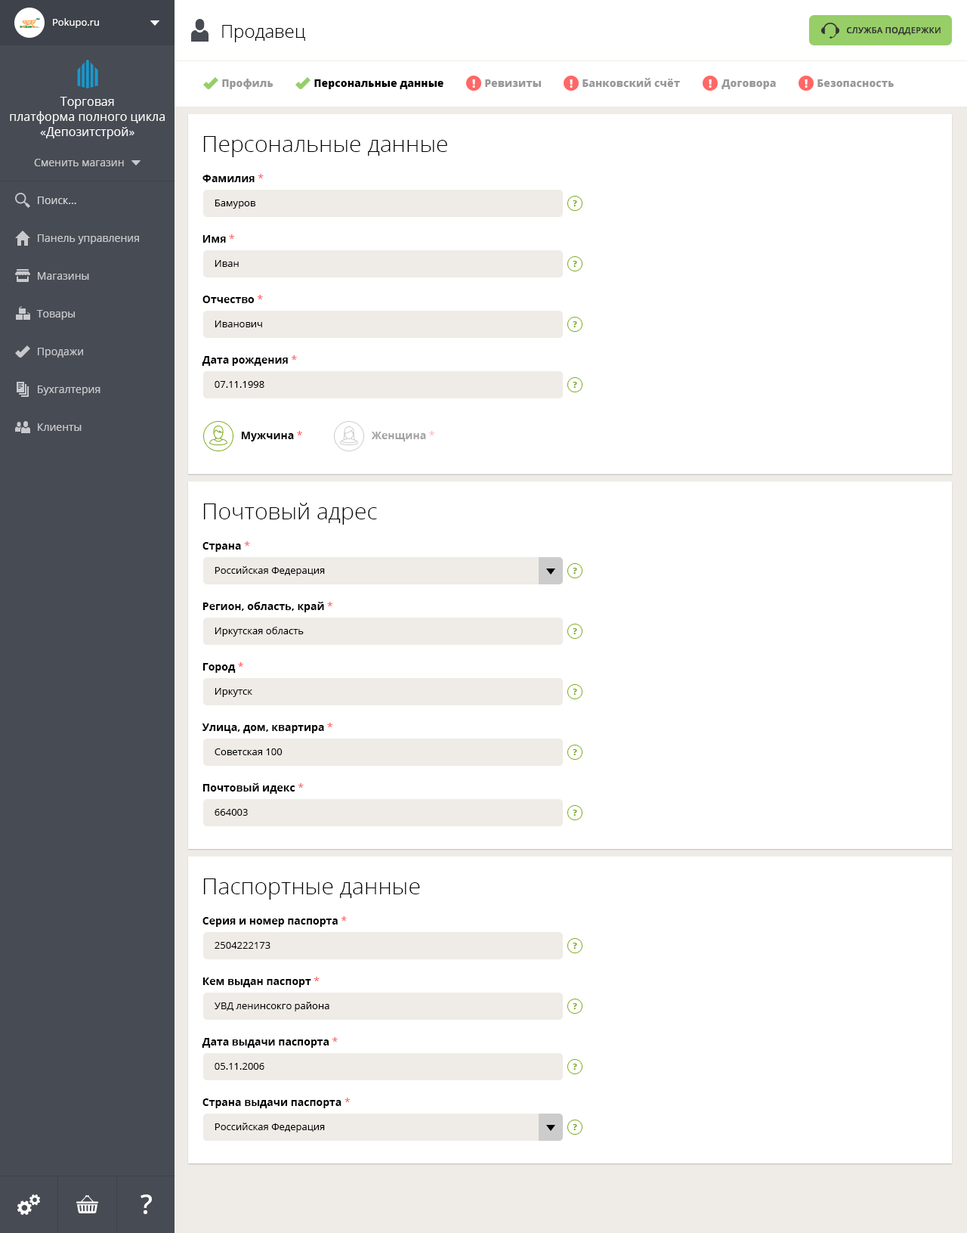
<style>
.page{position:relative;width:967px;height:1233px;background:#ffffff}
.page>*{position:absolute;margin:0}
.t1{font:9.8px "OpenSans";color:#ffffff}
.t2{font:18.1px "OpenSans-Light";color:#010101}
.t3{font:8.3px "OpenSans-Semibold";letter-spacing:0.025em;color:#333333;text-transform:uppercase}
.t4{font:10.6px "OpenSans-Extrabold";color:#999999}
.t5{font:10.6px "OpenSans-Extrabold";color:#000000}
.t6{font:12.1px/15.1px "OpenSans";color:#ffffff}
.t7{font:22.7px "OpenSans-Light";color:#000000}
.t8{font:10.6px "OpenSans";color:#c8c9cc}
.t9{font:10.6px "OpenSans-Bold";color:#000000}
.t10{font:10.6px "OpenSans";color:#fd5656}
.t11{font:10.6px "OpenSans";color:#d3d4d5}
.t12{font:9.8px "OpenSans";color:#000000}
.t13{font:8.3px "OpenSans-Extrabold";color:#7caa1f}
.t14{font:10.6px "OpenSans-Bold";color:#a3a3a3}
.t15{font:10.6px "OpenSans";color:#a3a3a3}
</style>
<div class="page">
<p class="t1" style="left:53px;top:18px;width:46px;height:10px">Pokupo.ru</p>
<p class="t2" style="left:222px;top:25px;width:83px;height:17px">Продавец</p>
<p class="t3" style="left:847px;top:26px;width:94px;height:10px">Служба поддержки</p>
<p class="t4" style="left:583px;top:78px;width:97px;height:9px">Банковский счёт</p>
<p class="t4" style="left:222px;top:79px;width:52px;height:10px">Профиль</p>
<p class="t5" style="left:314px;top:79px;width:130px;height:10px">Персональные данные</p>
<p class="t4" style="left:485px;top:79px;width:56px;height:8px">Ревизиты</p>
<p class="t4" style="left:722px;top:79px;width:54px;height:10px">Договора</p>
<p class="t4" style="left:818px;top:79px;width:76px;height:8px">Безопасность</p>
<p class="t6" style="left:10px;top:97px;width:155px;height:42px;text-align:center">Торговая<br>платформа полного цикла<br>«Депозитстрой»</p>
<p class="t7" style="left:203px;top:136px;width:244px;height:21px">Персональные данные</p>
<p class="t8" style="left:34px;top:159px;width:90px;height:7px">Сменить магазин</p>
<p class="t9" style="left:203px;top:174px;width:61px;height:8px">Фамилия <span class="t10">*</span></p>
<p class="t11" style="left:38px;top:196px;width:38px;height:8px">Поиск...</p>
<p class="t12" style="left:215px;top:200px;width:41px;height:9px">Бамуров</p>
<p class="t13" style="left:573px;top:200px;width:4px;height:6px">?</p>
<p class="t8" style="left:38px;top:234px;width:101px;height:10px">Панель управления</p>
<p class="t9" style="left:203px;top:234px;width:32px;height:9px">Имя <span class="t10">*</span></p>
<p class="t12" style="left:215px;top:260px;width:24px;height:7px">Иван</p>
<p class="t13" style="left:573px;top:261px;width:4px;height:6px">?</p>
<p class="t8" style="left:38px;top:272px;width:51px;height:8px">Магазины</p>
<p class="t9" style="left:203px;top:295px;width:60px;height:8px">Отчество <span class="t10">*</span></p>
<p class="t8" style="left:36px;top:310px;width:39px;height:10px">Товары</p>
<p class="t12" style="left:215px;top:320px;width:47px;height:7px">Иванович</p>
<p class="t13" style="left:573px;top:321px;width:4px;height:6px">?</p>
<p class="t8" style="left:38px;top:348px;width:45px;height:9px">Продажи</p>
<p class="t9" style="left:202px;top:355px;width:95px;height:11px">Дата рождения <span class="t10">*</span></p>
<p class="t8" style="left:38px;top:385px;width:63px;height:10px">Бухгалтерия</p>
<p class="t12" style="left:215px;top:381px;width:50px;height:7px">07.11.1998</p>
<p class="t13" style="left:573px;top:382px;width:4px;height:6px">?</p>
<p class="t8" style="left:38px;top:423px;width:44px;height:8px">Клиенты</p>
<p class="t9" style="left:241px;top:431px;width:61px;height:10px">Мужчина <span class="t10">*</span></p>
<p class="t14" style="left:371px;top:431px;width:64px;height:10px">Женщина <span class="t15">*</span></p>
<p class="t7" style="left:203px;top:503px;width:174px;height:21px">Почтовый адрес</p>
<p class="t9" style="left:203px;top:541px;width:47px;height:11px">Страна <span class="t10">*</span></p>
<p class="t12" style="left:215px;top:566px;width:110px;height:10px">Российская Федерация</p>
<p class="t13" style="left:573px;top:568px;width:4px;height:6px">?</p>
<p class="t9" style="left:203px;top:602px;width:130px;height:10px">Регион, область, край <span class="t10">*</span></p>
<p class="t12" style="left:215px;top:627px;width:89px;height:9px">Иркутская область</p>
<p class="t13" style="left:573px;top:628px;width:4px;height:6px">?</p>
<p class="t9" style="left:203px;top:662px;width:40px;height:11px">Город <span class="t10">*</span></p>
<p class="t12" style="left:215px;top:688px;width:37px;height:9px">Иркутск</p>
<p class="t13" style="left:573px;top:688px;width:4px;height:7px">?</p>
<p class="t9" style="left:202px;top:723px;width:131px;height:10px">Улица, дом, квартира <span class="t10">*</span></p>
<p class="t12" style="left:215px;top:748px;width:68px;height:7px">Советская 100</p>
<p class="t13" style="left:573px;top:749px;width:4px;height:6px">?</p>
<p class="t9" style="left:203px;top:783px;width:101px;height:11px">Почтовый идекс <span class="t10">*</span></p>
<p class="t12" style="left:215px;top:809px;width:33px;height:6px">664003</p>
<p class="t13" style="left:573px;top:809px;width:4px;height:6px">?</p>
<p class="t7" style="left:203px;top:878px;width:217px;height:21px">Паспортные данные</p>
<p class="t9" style="left:203px;top:916px;width:144px;height:11px">Серия и номер паспорта <span class="t10">*</span></p>
<p class="t12" style="left:215px;top:942px;width:56px;height:6px">2504222173</p>
<p class="t13" style="left:573px;top:942px;width:4px;height:6px">?</p>
<p class="t9" style="left:203px;top:976px;width:117px;height:11px">Кем выдан паспорт <span class="t10">*</span></p>
<p class="t12" style="left:214px;top:1001px;width:116px;height:10px">УВД ленинсокго района</p>
<p class="t13" style="left:573px;top:1003px;width:4px;height:6px">?</p>
<p class="t9" style="left:202px;top:1037px;width:136px;height:10px">Дата выдачи паспорта <span class="t10">*</span></p>
<p class="t12" style="left:215px;top:1063px;width:50px;height:6px">05.11.2006</p>
<p class="t13" style="left:573px;top:1063px;width:4px;height:6px">?</p>
<p class="t9" style="left:203px;top:1097px;width:148px;height:11px">Страна выдачи паспорта <span class="t10">*</span></p>
<p class="t12" style="left:215px;top:1122px;width:110px;height:10px">Российская Федерация</p>
<p class="t13" style="left:573px;top:1124px;width:4px;height:6px">?</p>
</div>
